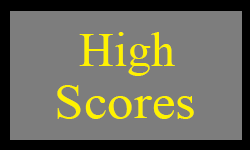
<style>
.page{position:relative;width:250px;height:150px;background:#7d7d7d}
.page>*{position:absolute;margin:0}
.t1{font:48px "TimesNewRomanPSMT";color:#fff200}
.t2{font:48px "TimesNewRomanPSMT";color:#fff200;scale:1.1 1}
</style>
<div class="page">
<p class="t1" style="left:79px;top:32px;width:96px;height:44px">High</p>
<p class="t2" style="left:57px;top:85px;width:137px;height:34px">Scores</p>
</div>
